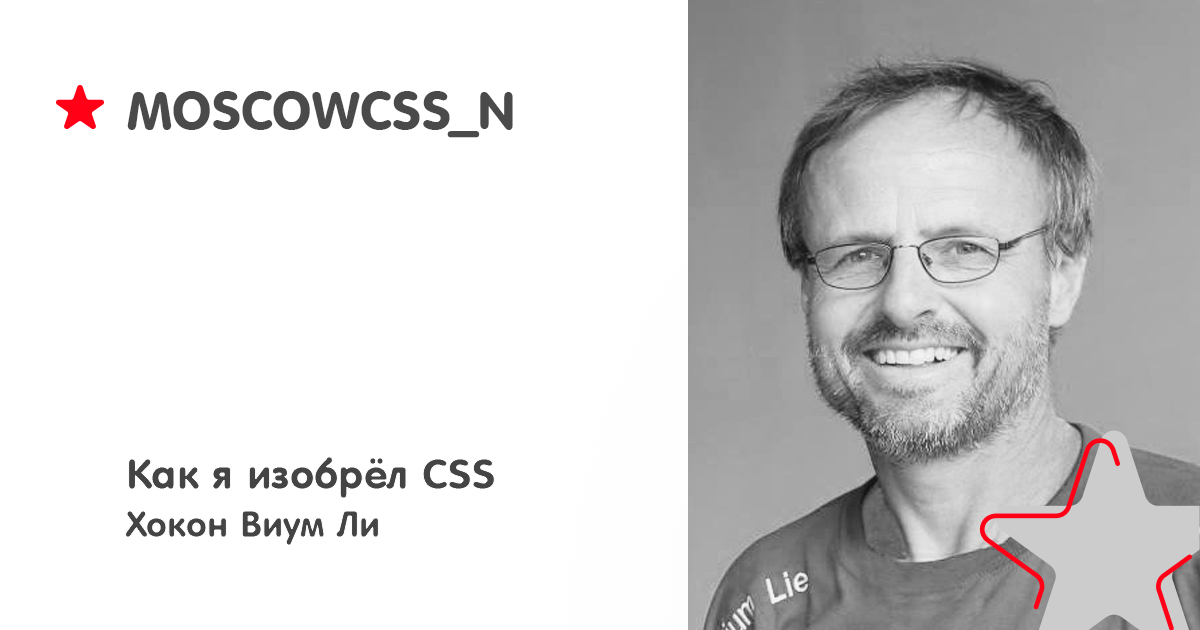
<style>
.page{position:relative;width:1200px;height:630px;background:#ffffff}
.page>*{position:absolute;margin:0}
.t1{font:51.6px "VAGRoundedTL-Regular";color:#4a4a4a;text-transform:uppercase}
.t2{font:42px/48px "VAGRoundedTL-Regular";color:#444444}
.t3{font:36px/48px "VAGRoundedTL-Regular";color:#444444}
</style>
<div class="page">
<p class="t1" style="left:127px;top:91px;width:386px;height:43px">moscowcss_N</p>
<p class="t2" style="left:125px;top:457px;width:370px;height:88px">Как я изобрёл CSS<br><span class="t3">Хокон Виум Ли</span></p>
</div>
